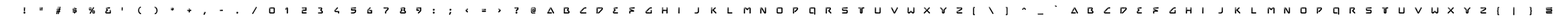
<style>
.page{position:relative;width:1568px;height:20px;background:#ffffff}
.page>*{position:absolute;margin:0}
.t1{font:9.1px "Chilopod-Regular";color:#000000}
</style>
<div class="page">
<p class="t1" style="left:23px;top:5px;width:1530px;height:10px">! " # $ % &amp; ' ( ) * + , - . / 0 1 2 3 4 5 6 7 8 9 : ; &lt; = &gt; ? @ A B C D E F G H I J K L M N O P Q R S T U V W X Y Z [ \ ] ^ _ ` a b c d e f g h i j k l m n o p q r s t u v w x y z { | } ~</p>
</div>
